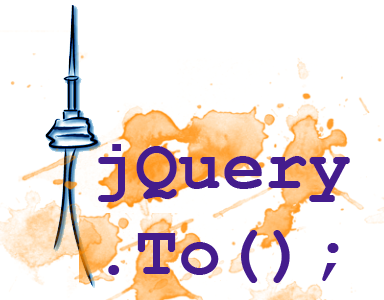
<style>
.page{position:relative;width:384px;height:300px;background:#ffffff}
.page>*{position:absolute;margin:0}
.t1{font:72px "CourierNewPS-BoldMT";color:#441c8d}
</style>
<div class="page">
<p class="t1" style="left:98px;top:144px;width:252px;height:139px">jQuery<br>.To();</p>
</div>
